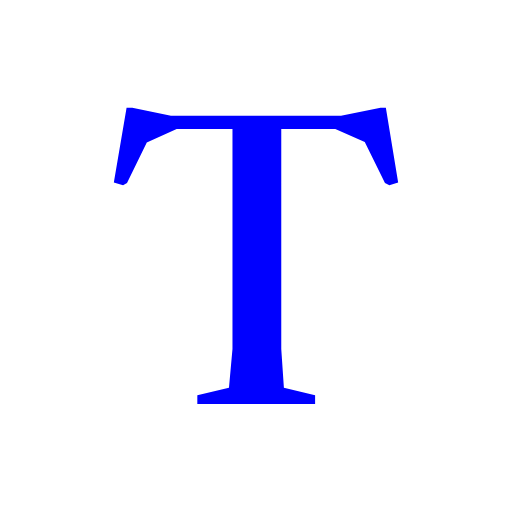
<style>
.page{position:relative;width:512px;height:512px;background:#ffffff}
.page>*{position:absolute;margin:0}
.t1{font:450px "Comprehension-SemiBold";color:#0000ff}
</style>
<div class="page">
<p class="t1" style="left:113px;top:107px;width:286px;height:297px">T</p>
</div>
